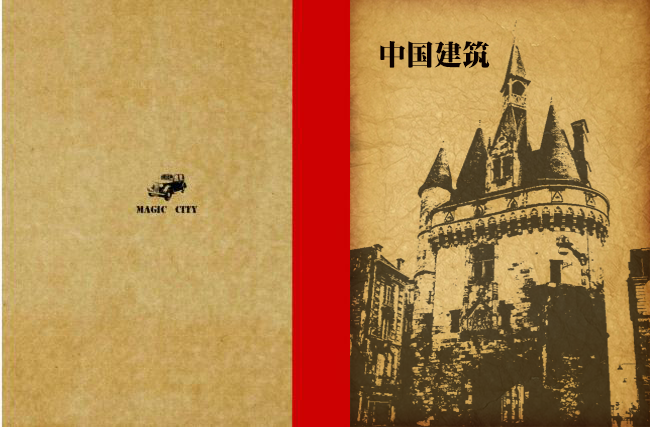
<style>
.page{position:relative;width:650px;height:427px}
.page>*{position:absolute;margin:0}
.t1{font:28px "SungtiEG-Ultra-GB";color:#0a0100}
</style>
<div class="page">
<p class="t1" style="left:380px;top:41px;width:110px;height:27px">中国建筑</p>
</div>
